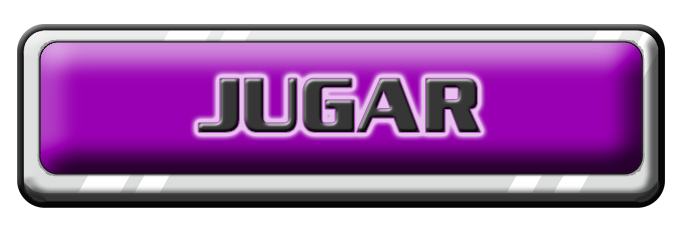
<style>
.page{position:relative;width:680px;height:230px;background:#ffffff}
.page>*{position:absolute;margin:0}
.t1{font:76.2px "EnterSansmanBold";color:#363636}
</style>
<div class="page">
<p class="t1" style="left:198px;top:78px;width:283px;height:54px">JUGAR</p>
</div>
